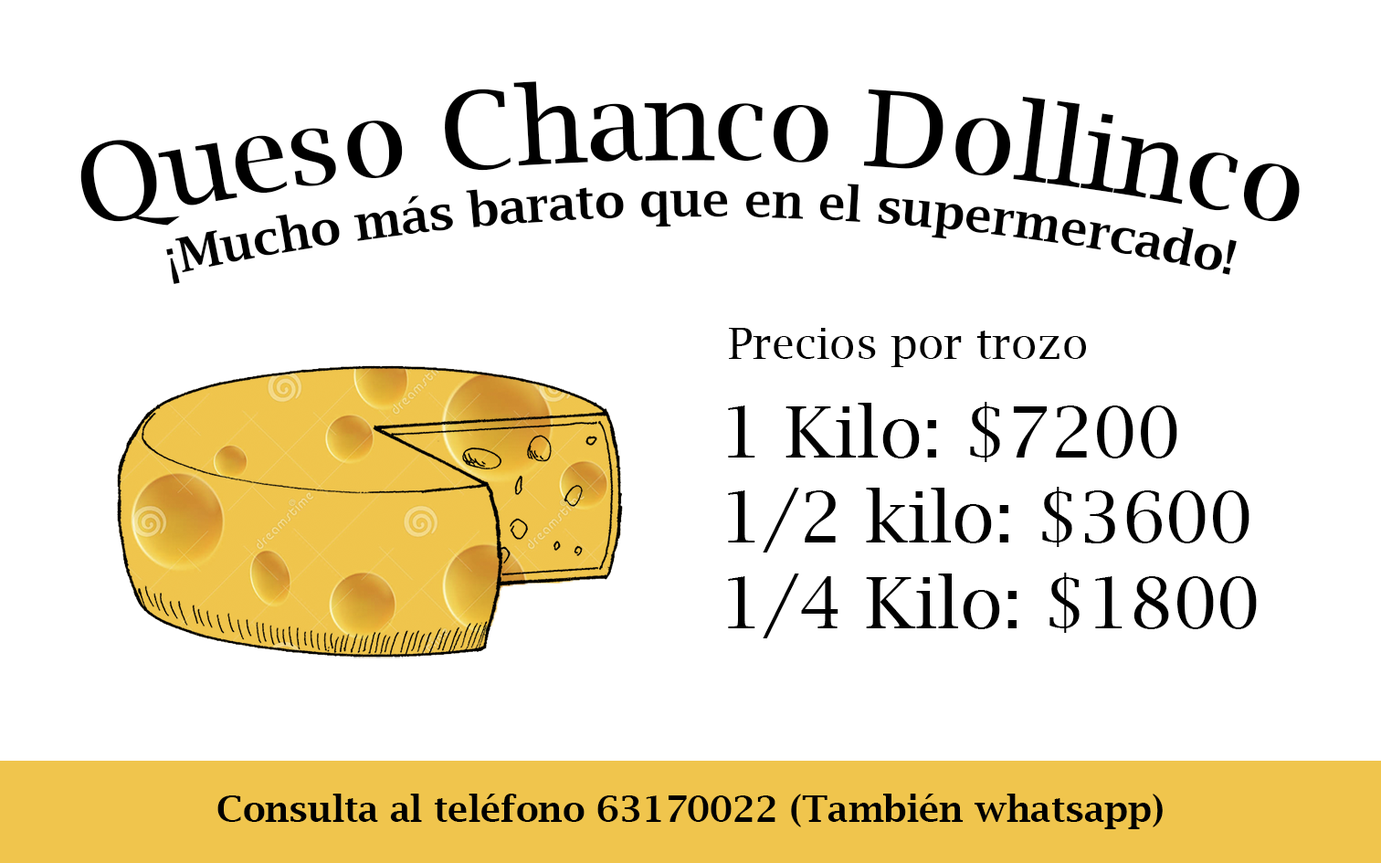
<style>
.page{position:relative;width:1381px;height:863px;background:#ffffff}
.page>*{position:absolute;margin:0}
.t1{font:25.5px "LucidaBright";color:#000000}
.t2{font:11.4px "LucidaBright-Demi";color:#000000}
.t3{font:10.3px "LucidaBright";color:#000000}
.t4{font:17.1px "LucidaBright";color:#000000}
.t5{font:8.8px "LucidaBright-Demi";color:#000000}
</style>
<div class="page">
<p class="t1" style="left:80px;top:81px;width:1220px;height:145px">Queso Chanco Dollinco</p>
<p class="t2" style="left:166px;top:184px;width:1071px;height:101px">¡Mucho más barato que en el supermercado!</p>
<p class="t3" style="left:729px;top:328px;width:357px;height:39px">Precios por trozo</p>
<p class="t4" style="left:728px;top:402px;width:529px;height:237px">1 Kilo: $7200<br>1/2 kilo: $3600<br>1/4 Kilo: $1800</p>
<p class="t5" style="left:217px;top:794px;width:946px;height:35px;text-align:center">Consulta al teléfono 63170022 (También whatsapp)</p>
</div>
